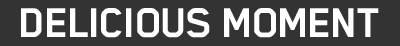
<style>
.page{position:relative;width:400px;height:46px;background:#333333}
.page>*{position:absolute;margin:0}
.t1{font:48px "BlenderPro-Bold";letter-spacing:-0.035em;color:#ffffff}
</style>
<div class="page">
<p class="t1" style="left:21px;top:8px;width:358px;height:30px">DELICIOUS MOMENT</p>
</div>
